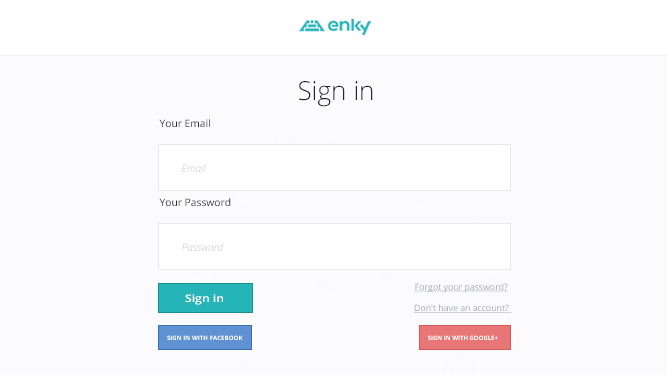
<style>
.page{position:relative;width:667px;height:375px;background:#fbfbfd}
.page>*{position:absolute;margin:0}
.t1{font:26.1px "OpenSans-Light";color:#25232b}
.t2{font:10.3px "OpenSans";color:#25232b}
.t3{font:10.3px "OpenSansLight-Italic";color:#c0c1ce}
.t4{font:10.5px "OpenSans-Semibold";color:#ffffff;scale:1.16 1}
.t5{font:8.7px "OpenSans";color:#a0a1af;text-decoration:underline}
.t6{font:6.1px "OpenSans-Bold";color:#ffffff;text-transform:uppercase}
</style>
<div class="page">
<p class="t1" style="left:299px;top:81px;width:74px;height:26px">Sign in</p>
<p class="t2" style="left:159px;top:119px;width:51px;height:8px">Your Email</p>
<p class="t3" style="left:182px;top:164px;width:25px;height:8px">Email</p>
<p class="t2" style="left:159px;top:198px;width:72px;height:8px">Your Password</p>
<p class="t3" style="left:182px;top:243px;width:42px;height:8px">Password</p>
<p class="t4" style="left:185px;top:294px;width:38px;height:11px">Sign in</p>
<p class="t5" style="left:414px;top:283px;width:94px;height:9px">Forgot your password?</p>
<p class="t5" style="left:414px;top:304px;width:98px;height:9px">Don't have an account?</p>
<p class="t6" style="left:167px;top:335px;width:76px;height:5px">Sign in with facebook</p>
<p class="t6" style="left:428px;top:335px;width:70px;height:5px">Sign in with google+</p>
</div>
